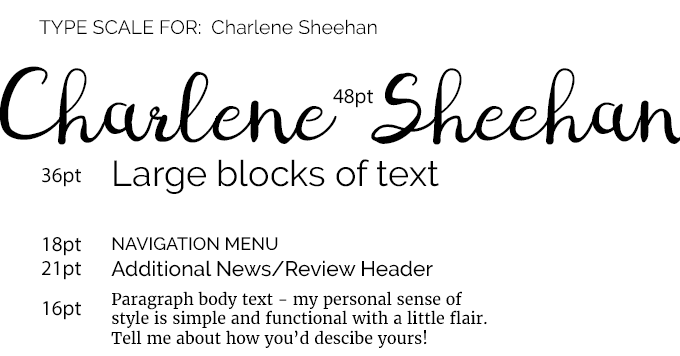
<style>
.page{position:relative;width:680px;height:356px;background:#ffffff}
.page>*{position:absolute;margin:0}
.t1{font:19.5px "Raleway-Regular";color:#000000}
.t2{font:19.5px "Raleway-Regular";color:#000000;text-transform:uppercase}
.t3{font:21px "MyriadPro-Regular";color:#000000}
.t4{font:36px "Raleway-Regular";color:#000000}
.t5{font:18px "Raleway-Medium";color:#000000}
.t6{font:21px "Raleway-Medium";color:#000000}
.t7{font:16px/19.5px "Merriweather-Regular";color:#000000}
</style>
<div class="page">
<p class="t1" style="left:39px;top:19px;width:338px;height:16px"><span class="t2">TYPE SCALE for</span>:  Charlene Sheehan</p>
<p class="t3" style="left:333px;top:89px;width:40px;height:19px">48pt</p>
<p class="t4" style="left:114px;top:159px;width:325px;height:35px">Large blocks of text</p>
<p class="t3" style="left:42px;top:168px;width:39px;height:19px">36pt</p>
<p class="t3" style="left:43px;top:237px;width:38px;height:19px">18pt</p>
<p class="t5" style="left:112px;top:237px;width:166px;height:13px">NAVIGATION MENU</p>
<p class="t3" style="left:42px;top:261px;width:39px;height:19px">21pt</p>
<p class="t6" style="left:111px;top:260px;width:322px;height:17px">Additional News/Review Header</p>
<p class="t7" style="left:111px;top:291px;width:376px;height:57px">Paragraph body text - my personal sense of style is simple and functional with a little flair. Tell me about how you’d descibe yours!</p>
<p class="t3" style="left:43px;top:301px;width:38px;height:19px">16pt</p>
</div>
